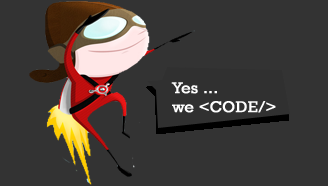
<style>
.page{position:relative;width:328px;height:186px;background:#333333}
.page>*{position:absolute;margin:0}
.t1{font:16px "Rockwell";color:#fefefe;font-weight:bold}
</style>
<div class="page">
<p class="t1" style="left:171px;top:82px;width:105px;height:31px">Yes ...<br>we &lt;CODE/&gt;</p>
</div>
